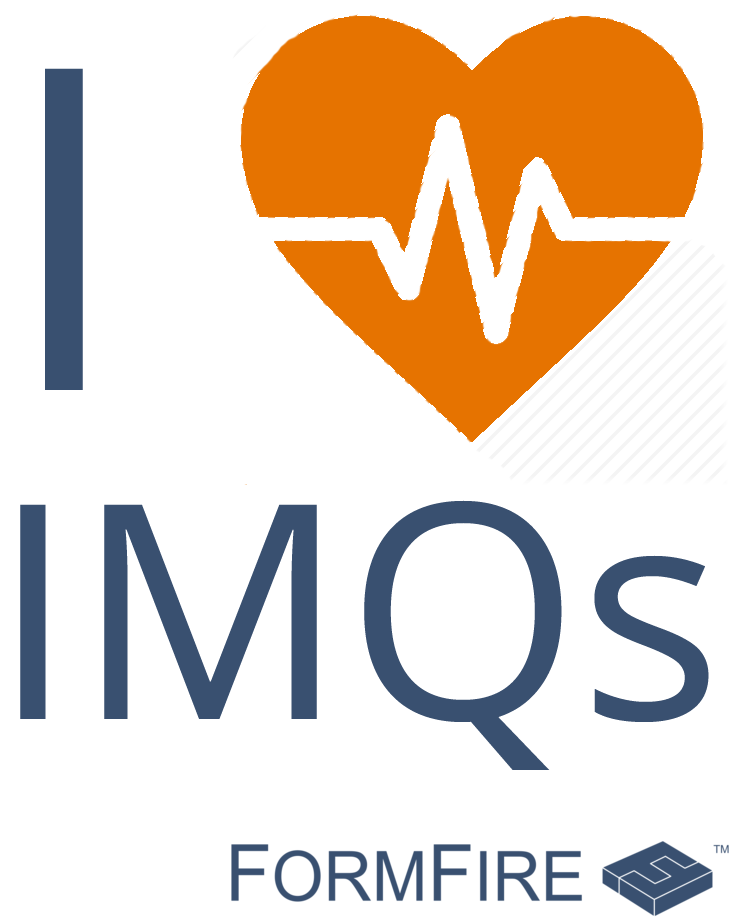
<style>
.page{position:relative;width:729px;height:917px;background:#ffffff}
.page>*{position:absolute;margin:0}
.t1{font:450px "OpenSans-Regular";color:#395070}
.t2{font:300px "OpenSans-Regular";color:#395070}
</style>
<div class="page">
<p class="t1" style="left:45px;top:68px;width:38px;height:322px">I</p>
<p class="t2" style="left:20px;top:500px;width:689px;height:270px">IMQs</p>
</div>
